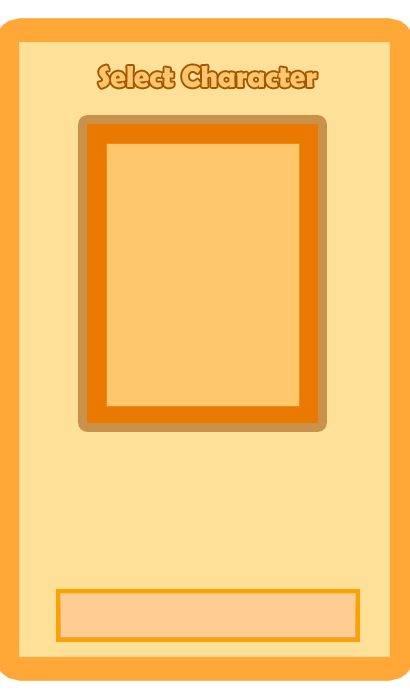
<style>
.page{position:relative;width:410px;height:700px;background:#ffe098}
.page>*{position:absolute;margin:0}
.t1{font:30.6px "BerlinSansFBDemi-Bold";color:#ffc66b}
</style>
<div class="page">
<p class="t1" style="left:98px;top:65px;width:219px;height:23px">Select Character</p>
</div>
